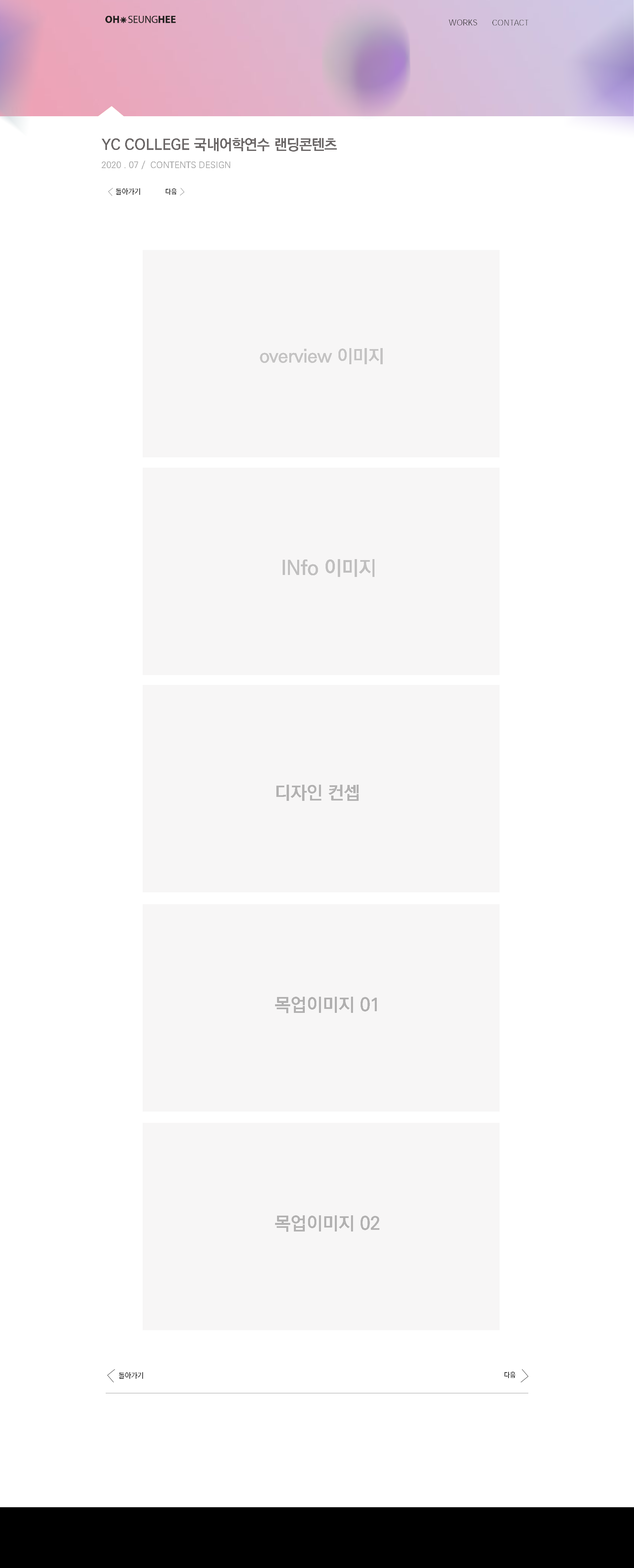
<style>
.page{position:relative;width:634px;height:1568px;background:#ffffff}
.page>*{position:absolute;margin:0}
.t1{font:14.7px "KoPubWorldDotumBold";color:#6c6868}
.t2{font:8.8px "KoPubWorldDotumPM";color:#a7a7a7}
.t3{font:7.2px "KoPubWorldDotumPM";color:#1b1b1b}
.t4{font:6.8px "KoPubWorldDotumPM";color:#1b1b1b}
.t5{font:18.1px "KoPubWorldDotumBold";color:#c4c3c3}
.t6{font:20.2px "KoPubWorldDotumBold";color:#c0bfbf}
.t7{font:18.3px "KoPubWorldDotumPB";color:#b2b1b1}
.t8{font:18.3px "KoPubWorldDotumPB";color:#b0afaf}
</style>
<div class="page">
<p class="t1" style="left:102px;top:138px;width:235px;height:14px">YC COLLEGE 국내어학연수 랜딩콘텐츠</p>
<p class="t2" style="left:102px;top:160px;width:128px;height:9px">2020 . 07 /  CONTENTS DESIGN</p>
<p class="t3" style="left:116px;top:188px;width:24px;height:7px">돌아가기</p>
<p class="t4" style="left:166px;top:189px;width:11px;height:6px">다음</p>
<p class="t5" style="left:260px;top:348px;width:123px;height:16px">overview 이미지</p>
<p class="t6" style="left:283px;top:559px;width:91px;height:18px">INfo 이미지</p>
<p class="t7" style="left:276px;top:785px;width:83px;height:16px">디자인 컨셉</p>
<p class="t8" style="left:275px;top:997px;width:102px;height:16px">목업이미지 01</p>
<p class="t7" style="left:275px;top:1215px;width:104px;height:17px">목업이미지 02</p>
<p class="t3" style="left:119px;top:1372px;width:24px;height:7px">돌아가기</p>
<p class="t4" style="left:505px;top:1372px;width:11px;height:6px">다음</p>
</div>
